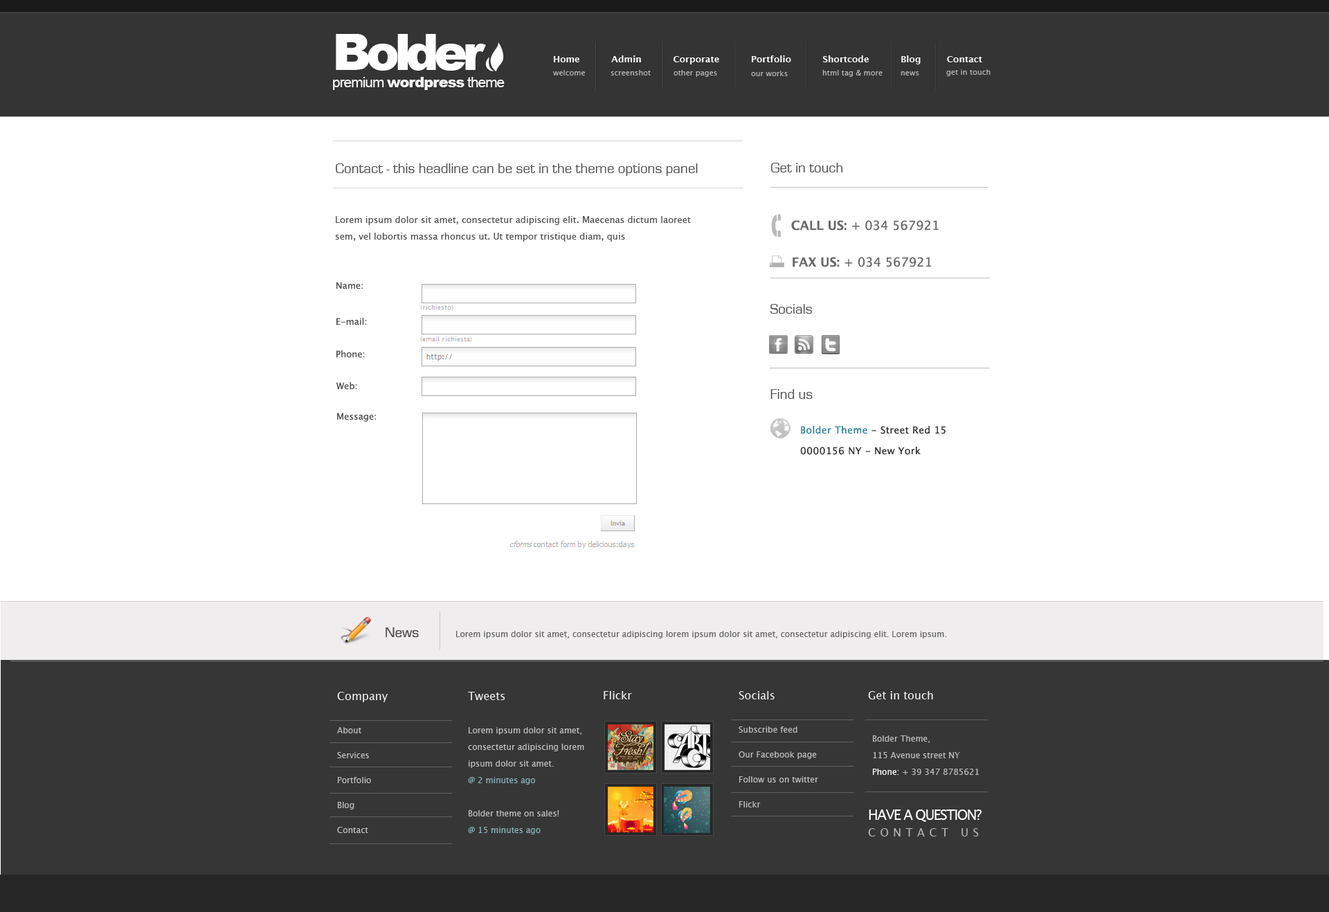
<style>
.page{position:relative;width:1329px;height:912px;background:#ffffff}
.page>*{position:absolute;margin:0}
.t1{font:14.5px "Arial-Black";letter-spacing:-0.05em;color:#ffffff}
.t2{font:49.8px "Arial-Black";letter-spacing:-0.1em;color:#ffffff}
.t3{font:14.5px "ArialMT";letter-spacing:-0.05em;color:#ffffff}
.t4{font:9px "LucidaSans-Demi";color:#ffffff}
.t5{font:7.6px "LucidaSans";color:#b7b5b5}
.t6{font:14.5px "EurostileRegular";color:#535252}
.t7{font:12.5px "LucidaSans";color:#696969}
.t8{font:12.5px "LucidaSans-Demi";color:#696969}
.t9{font:9.7px/20.8px "LucidaSans";letter-spacing:0.025em;color:#373636}
.t10{font:9.7px/20.8px "LucidaSans";letter-spacing:0.025em;color:#328499}
.t11{font:8.3px "LucidaSans";color:#696969}
.t12{font:8.3px/24.9px "LucidaSans";color:#c0bfbf}
.t13{font:11.1px/16.6px "LucidaSans";color:#f1efef}
.t14{font:8.3px/33.2px "LucidaSans";color:#c0bfbf}
.t15{font:8.3px/16.6px "LucidaSans";color:#c0bfbf}
.t16{font:8.3px/16.6px "LucidaSans";color:#88b3b9}
.t17{font:11.1px "LucidaSans";color:#f1efef}
.t18{font:8.3px/16.6px "LucidaSans";color:#ffffff}
.t19{font:13.8px/33.2px "LucidaSans";letter-spacing:-0.075em;color:#ffffff}
.t20{font:11.1px/16.6px "LucidaSans";letter-spacing:0.4em;color:#b6b5b5}
</style>
<div class="page">
<p class="t1" style="left:333px;top:34px;width:172px;height:56px"><span class="t2">Bolder<br></span><span class="t3">premium </span>wordpress<span class="t3"> theme</span></p>
<p class="t4" style="left:554px;top:55px;width:428px;height:9px">Home           Admin           Corporate           Portfolio           Shortcode           Blog         Contact</p>
<p class="t5" style="left:553px;top:70px;width:32px;height:5px">welcome</p>
<p class="t5" style="left:611px;top:70px;width:40px;height:5px">screenshot</p>
<p class="t5" style="left:674px;top:70px;width:43px;height:7px">other pages</p>
<p class="t5" style="left:751px;top:71px;width:37px;height:5px">our works</p>
<p class="t5" style="left:822px;top:70px;width:61px;height:7px">html tag &amp; more</p>
<p class="t5" style="left:901px;top:71px;width:18px;height:4px">news</p>
<p class="t5" style="left:946px;top:69px;width:45px;height:7px">get in touch</p>
<p class="t6" style="left:336px;top:163px;width:362px;height:13px">Contact - this headline can be set in the theme options panel</p>
<p class="t6" style="left:771px;top:163px;width:72px;height:9px">Get in touch</p>
<p class="t7" style="left:791px;top:220px;width:148px;height:11px"><span class="t8">CALL US:</span> + 034 567921</p>
<p class="t7" style="left:793px;top:257px;width:139px;height:10px"><span class="t8">FAX US:</span> + 034 567921</p>
<p class="t6" style="left:771px;top:304px;width:41px;height:10px">Socials</p>
<p class="t6" style="left:771px;top:389px;width:42px;height:10px">Find us</p>
<p class="t9" style="left:800px;top:426px;width:146px;height:29px"><span class="t10">Bolder Theme</span> - Street Red 15<br>0000156 NY - New York</p>
<p class="t6" style="left:386px;top:627px;width:33px;height:11px">News</p>
<p class="t11" style="left:456px;top:631px;width:491px;height:7px">Lorem ipsum dolor sit amet, consectetur adipiscing lorem ipsum dolor sit amet, consectetur adipiscing elit. Lorem ipsum.</p>
<p class="t12" style="left:337px;top:692px;width:51px;height:141px"><span class="t13">Company<br></span><span class="t14">About<br></span>Services<br>Portfolio<br>Blog<br>Contact</p>
<p class="t15" style="left:468px;top:692px;width:116px;height:142px"><span class="t13">Tweets<br></span><span class="t14">Lorem ipsum dolor sit amet, </span>consectetur adipiscing lorem ipsum dolor sit amet.<br><span class="t16">@ 2 minutes ago<br></span><span class="t14">Bolder theme on sales!<br></span><span class="t16">@ 15 minutes ago</span></p>
<p class="t17" style="left:604px;top:691px;width:28px;height:8px">Flickr</p>
<p class="t12" style="left:739px;top:691px;width:79px;height:116px"><span class="t13">Socials<br></span><span class="t14">Subscribe feed<br></span>Our Facebook page<br>Follow us on twitter<br>Flickr</p>
<p class="t17" style="left:868px;top:691px;width:65px;height:8px">Get in touch</p>
<p class="t15" style="left:873px;top:735px;width:106px;height:40px"><span class="t13"><br></span><span class="t14">Bolder Theme,<br></span>115 Avenue street NY<br><span class="t18">Phone:</span> + 39 347 8785621</p>
<p class="t19" style="left:868px;top:809px;width:114px;height:27px">HAVE A QUESTION?<br><span class="t20">CONTACT US</span></p>
</div>
